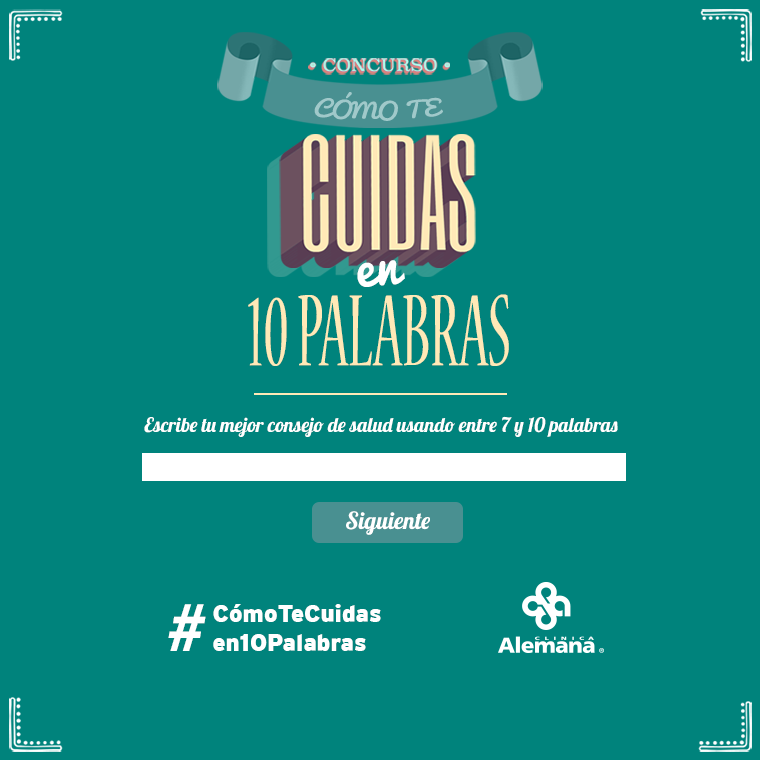
<style>
.page{position:relative;width:760px;height:760px;background:#00837c}
.page>*{position:absolute;margin:0}
.t1{font:20.5px "Pacifico-Regular";color:#a0c9ca;text-transform:uppercase;scale:1.17 1}
.t2{font:52.2px "Pacifico-Regular";letter-spacing:-0.002em;color:#ffffff}
.t3{font:112.8px "NuevaStd-Cond";letter-spacing:-0.002em;color:#ffe9b7;scale:0.6 1}
.t4{font:20px "Lobster-Regular";letter-spacing:-0.002em;color:#ffffff}
.t5{font:23.5px "Lobster-Regular";letter-spacing:-0.002em;color:#ffffff}
.t6{font:72px "MyriadPro-BoldIt";color:#ffffff}
.t7{font:24.2px "Interstate-Black";color:#ffffff}
</style>
<div class="page">
<p class="t1" style="left:314px;top:92px;width:129px;height:29px">cómo te</p>
<p class="t2" style="left:357px;top:260px;width:48px;height:27px;rotate:-4deg">en</p>
<p class="t3" style="left:248px;top:294px;width:261px;height:72px">10 PALABRAS</p>
<p class="t4" style="left:144px;top:416px;width:474px;height:21px">Escribe tu mejor consejo de salud usando entre 7 y 10 palabras</p>
<p class="t5" style="left:346px;top:511px;width:84px;height:24px">Siguiente</p>
<p class="t6" style="left:168px;top:604px;width:38px;height:47px">#</p>
<p class="t7" style="left:213px;top:604px;width:168px;height:47px">CómoTeCuidas<br>en10Palabras</p>
</div>
